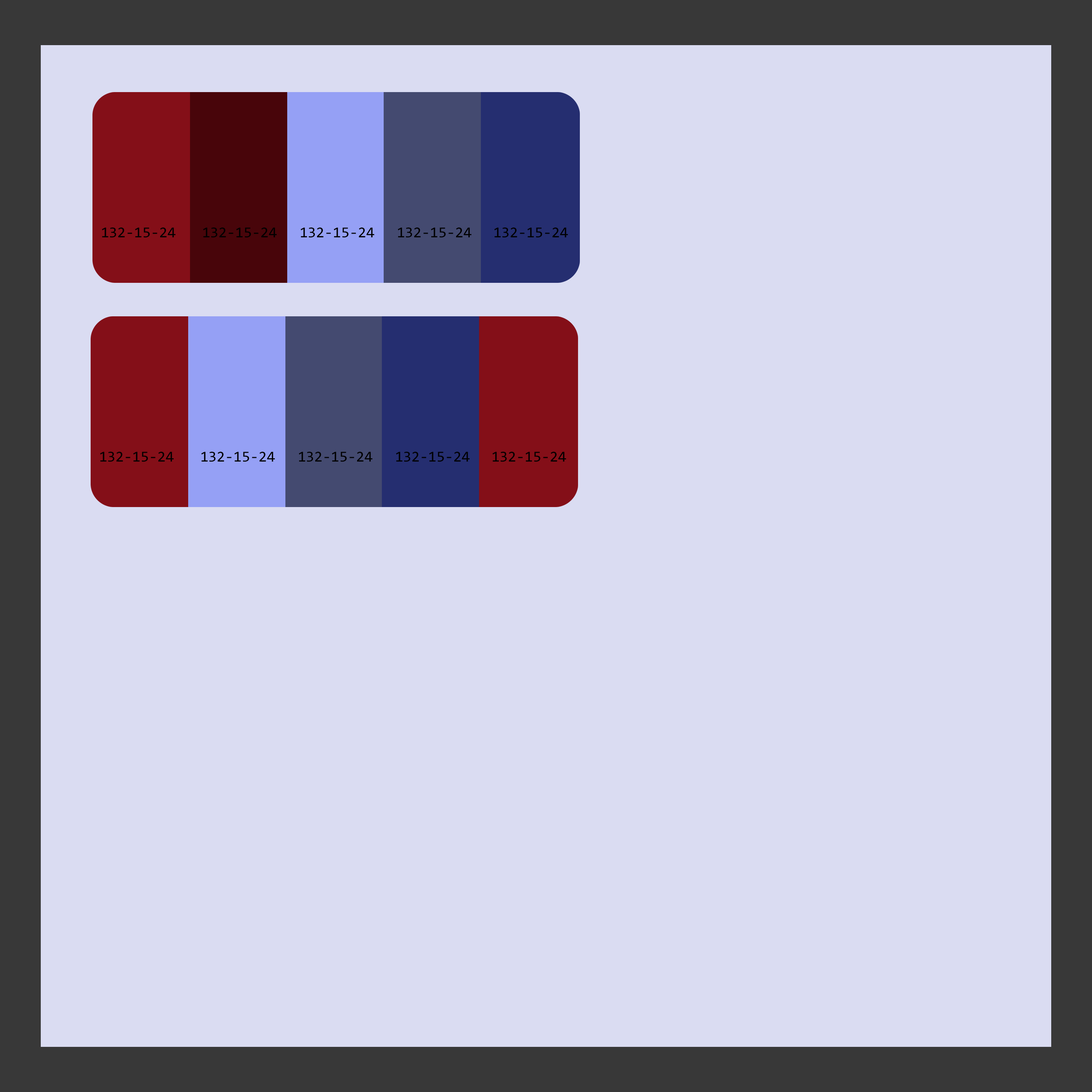
<style>
.page{position:relative;width:1092px;height:1092px;background:#dadcf2}
.page>*{position:absolute;margin:0}
.t1{font:15.2px "Consolas";color:#000000}
</style>
<div class="page">
<p class="t1" style="left:102px;top:227px;width:73px;height:11px">132-15-24</p>
<p class="t1" style="left:203px;top:227px;width:74px;height:11px">132-15-24</p>
<p class="t1" style="left:301px;top:227px;width:73px;height:11px">132-15-24</p>
<p class="t1" style="left:398px;top:227px;width:73px;height:11px">132-15-24</p>
<p class="t1" style="left:494px;top:227px;width:74px;height:11px">132-15-24</p>
<p class="t1" style="left:100px;top:452px;width:74px;height:10px">132-15-24</p>
<p class="t1" style="left:201px;top:452px;width:74px;height:10px">132-15-24</p>
<p class="t1" style="left:299px;top:452px;width:73px;height:10px">132-15-24</p>
<p class="t1" style="left:396px;top:452px;width:74px;height:10px">132-15-24</p>
<p class="t1" style="left:492px;top:452px;width:74px;height:10px">132-15-24</p>
</div>
